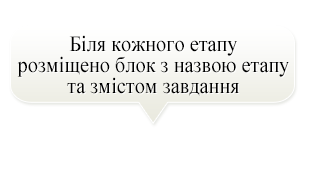
<style>
.page{position:relative;width:312px;height:170px;background:#ffffff}
.page>*{position:absolute;margin:0}
.t1{font:22.1px/21px "TimesNewRomanPSMT";color:#000000;scale:0.92 1}
</style>
<div class="page">
<p class="t1" style="left:17px;top:35px;width:272px;height:61px;text-align:center">Біля кожного етапу<br>розміщено блок з назвою етапу<br>та змістом завдання</p>
</div>
